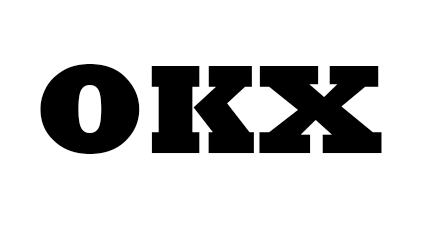
<style>
.page{position:relative;width:447px;height:233px;background:#ffffff}
.page>*{position:absolute;margin:0}
.t1{font:128.9px "Rockwell-ExtraBold";color:#000000;text-transform:uppercase}
</style>
<div class="page">
<p class="t1" style="left:40px;top:64px;width:342px;height:90px">okx</p>
</div>
